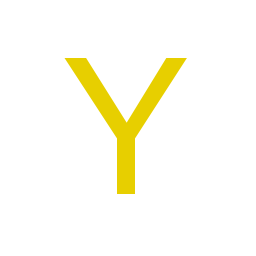
<style>
.page{position:relative;width:256px;height:256px;background:#ffffff}
.page>*{position:absolute;margin:0}
.t1{font:190px "HelveticaNeueLTPro-Roman";color:#e7cf00}
</style>
<div class="page">
<p class="t1" style="left:64px;top:58px;width:123px;height:136px">Y</p>
</div>
